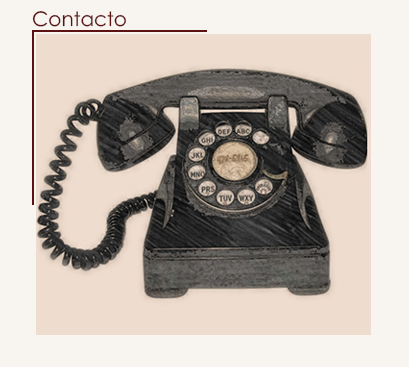
<style>
.page{position:relative;width:409px;height:367px;background:#f8f4ef}
.page>*{position:absolute;margin:0}
.t1{font:20px "CenturyGothic";color:#5c1213}
</style>
<div class="page">
<p class="t1" style="left:32px;top:11px;width:94px;height:16px">Contacto</p>
</div>
